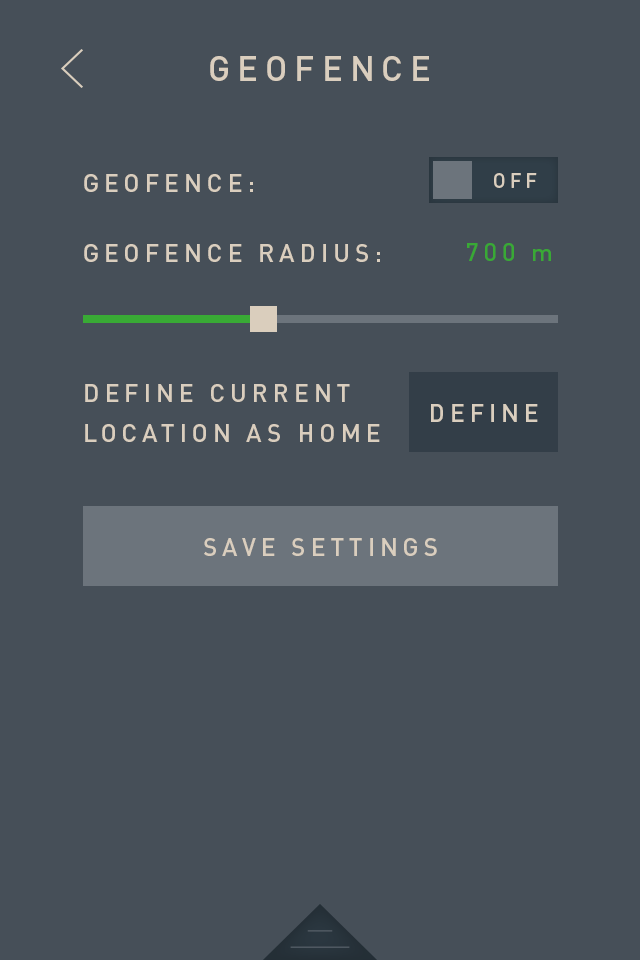
<style>
.page{position:relative;width:640px;height:960px;background:#464f58}
.page>*{position:absolute;margin:0}
.t1{font:35px "DINPro-Medium";letter-spacing:0.2em;color:#dacebe}
.t2{font:25px/70px "DINPro-Medium";letter-spacing:0.2em;color:#dacebe}
.t3{font:25px/40px "DINPro-Medium";letter-spacing:0.2em;color:#dacebe}
.t4{font:20.3px "DINPro-Medium";letter-spacing:0.2em;color:#dacebe}
.t5{font:24.9px "DINPro-Medium";letter-spacing:0.2em;color:#39a935}
.t6{font:25.2px/106.3px "DINPro-Medium";letter-spacing:0.2em;color:#dacebe}
.t7{font:25.3px/106.3px "DINPro-Medium";letter-spacing:0.2em;color:#dacebe}
</style>
<div class="page">
<p class="t1" style="left:210px;top:56px;width:219px;height:25px">GEOFENCE</p>
<p class="t2" style="left:84px;top:174px;width:296px;height:268px">GEOFENCE:<br>GEOFENCE RADIUS:<br><br>DEFINE CURRENT <br><span class="t3">LOCATION AS HOME</span></p>
<p class="t4" style="left:494px;top:173px;width:43px;height:15px">OFF</p>
<p class="t5" style="left:467px;top:243px;width:84px;height:18px">700 m</p>
<p class="t6" style="left:431px;top:404px;width:107px;height:18px;text-align:center">DEFINE<br><span class="t7">ISCH</span></p>
<p class="t6" style="left:204px;top:538px;width:233px;height:18px;text-align:center">SAVE SETTINGS<br><span class="t7">ISCH</span></p>
</div>
